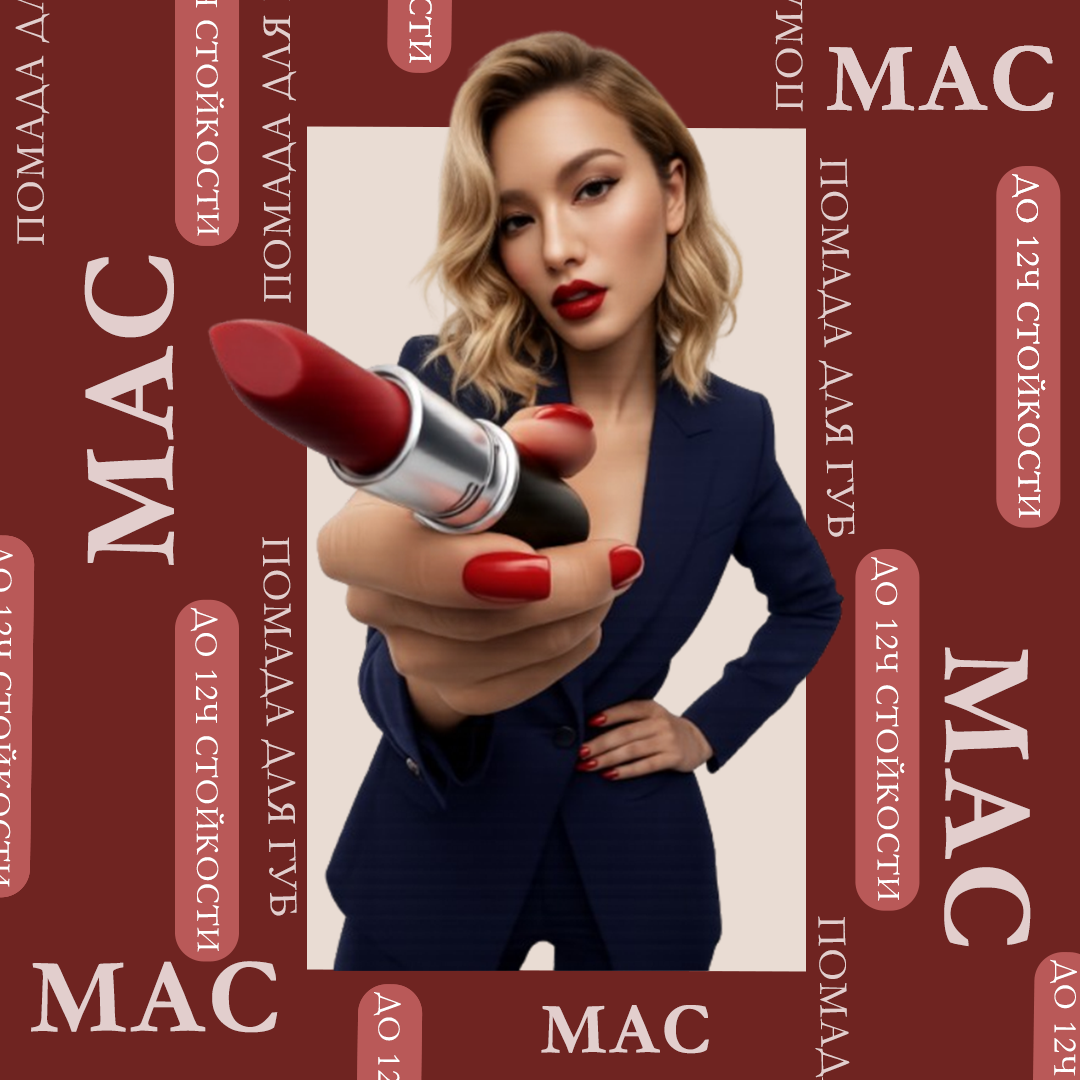
<style>
.page{position:relative;width:1080px;height:1080px;background:#6f2421}
.page>*{position:absolute;margin:0}
.t1{font:99.1px "Garamond-Bold";letter-spacing:0.04em;color:#e2cecd}
.t2{font:41.6px "Garamond";letter-spacing:0.04em;color:#e2cecd}
.t3{font:33.1px "Garamond";letter-spacing:0.04em;color:#ffffff}
.t4{font:135.7px "Garamond-Bold";letter-spacing:0.04em;color:#e2cecd}
.t5{font:131px "Garamond-Bold";letter-spacing:0.04em;color:#e2cecd}
.t6{font:107.9px "Garamond-Bold";letter-spacing:0.04em;color:#e2cecd}
.t7{font:73.4px "Garamond-Bold";letter-spacing:0.04em;color:#e2cecd}
</style>
<div class="page">
<p class="t1" style="left:827px;top:45px;width:227px;height:66px">MAC</p>
<p class="t1" style="left:827px;top:45px;width:227px;height:66px">MAC</p>
<p class="t2" style="left:817px;top:158px;width:38px;height:379px;rotate:89deg">ПОМАДА ДЛЯ ГУБ</p>
<p class="t3" style="left:1012px;top:174px;width:34px;height:344px;rotate:90deg">ДО 12Ч СТОЙКОСТИ</p>
<p class="t3" style="left:1012px;top:174px;width:34px;height:344px;rotate:90deg">ДО 12Ч СТОЙКОСТИ</p>
<p class="t4" style="left:84px;top:255px;width:90px;height:310px;rotate:-90deg">MAC</p>
<p class="t2" style="left:259px;top:537px;width:38px;height:379px;rotate:89deg">ПОМАДА ДЛЯ ГУБ</p>
<p class="t3" style="left:871px;top:557px;width:34px;height:344px;rotate:90deg">ДО 12Ч СТОЙКОСТИ</p>
<p class="t3" style="left:190px;top:607px;width:34px;height:345px;rotate:90deg">ДО 12Ч СТОЙКОСТИ</p>
<p class="t5" style="left:944px;top:647px;width:87px;height:300px;rotate:90deg">MAC</p>
<p class="t6" style="left:31px;top:961px;width:247px;height:72px">MAC</p>
<p class="t7" style="left:541px;top:1005px;width:168px;height:49px">MAC</p>
</div>
